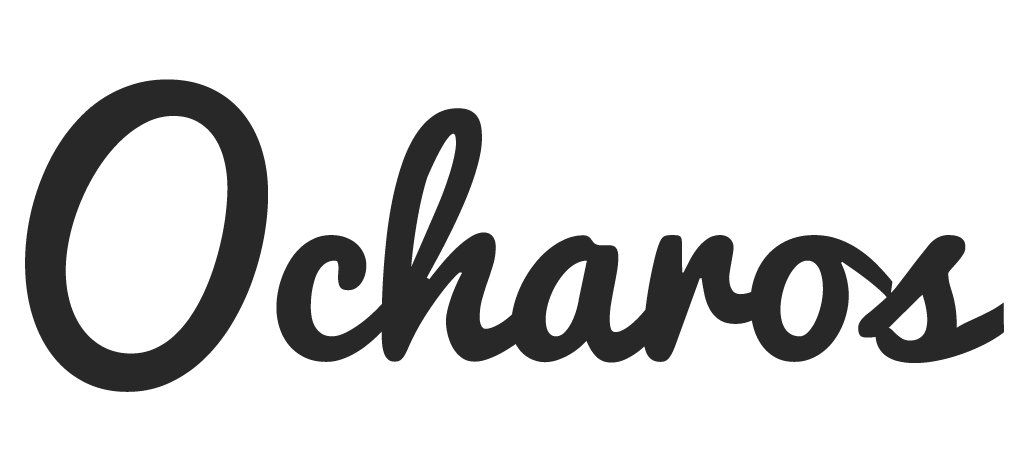
<style>
.page{position:relative;width:1026px;height:469px;background:#ffffff}
.page>*{position:absolute;margin:0}
.t1{font:270px "Pacifico-Regular";color:#282828}
.t2{font:320px "Pacifico-Regular";color:#282828}
</style>
<div class="page">
<p class="t1" style="left:25px;top:79px;width:979px;height:313px"><span class="t2">O</span>charos</p>
</div>
